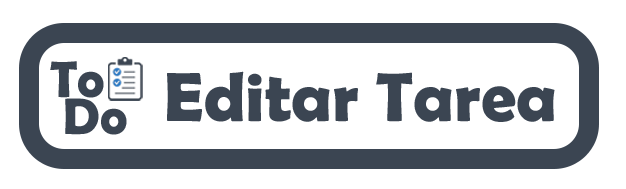
<style>
.page{position:relative;width:626px;height:189px;background:#ffffff}
.page>*{position:absolute;margin:0}
.t1{font:51.8px/36.6px "BerlinSansFBDemi-Bold";color:#3b4552}
.t2{font:70px "BerlinSansFBDemi-Bold";color:#3b4552}
</style>
<div class="page">
<p class="t1" style="left:50px;top:61px;width:77px;height:74px">To<br> Do</p>
<p class="t2" style="left:167px;top:71px;width:388px;height:51px">Editar Tarea</p>
</div>
